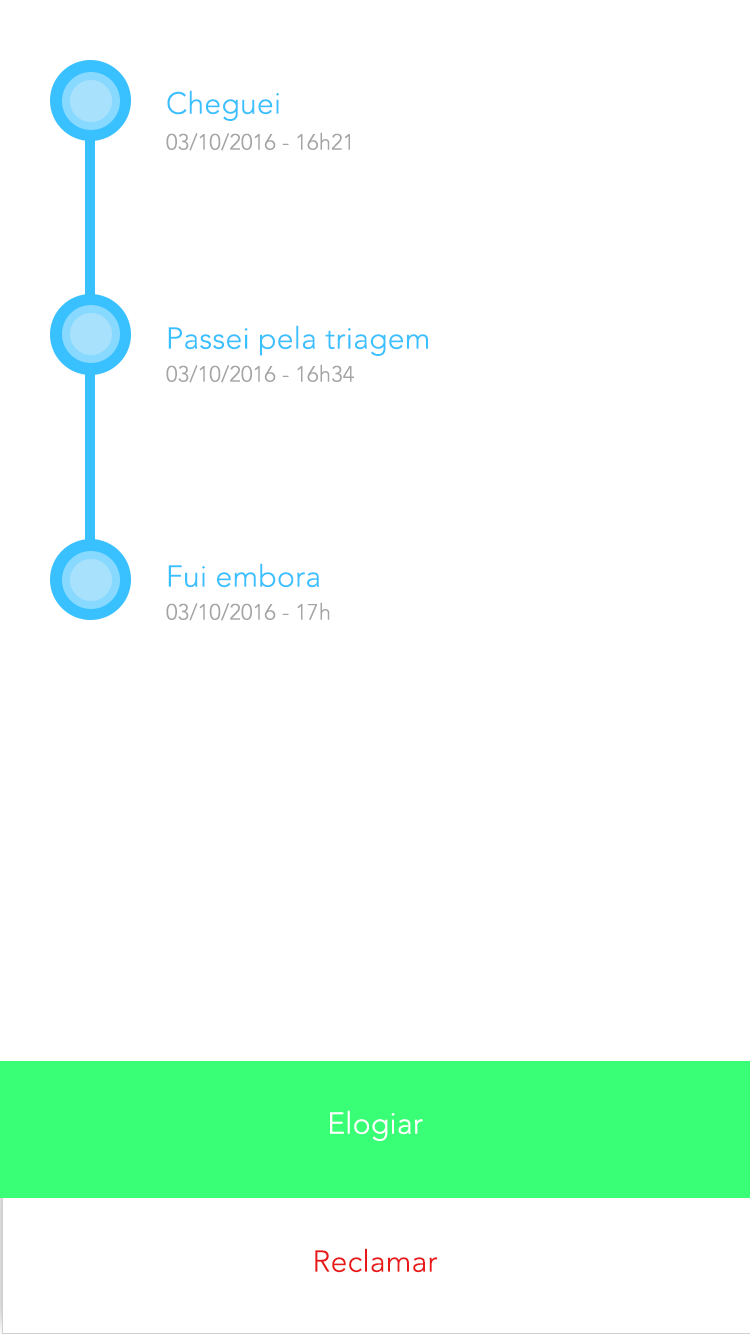
<style>
.page{position:relative;width:750px;height:1334px;background:#ffffff}
.page>*{position:absolute;margin:0}
.t1{font:30px "AvenirLTStd-Light";letter-spacing:0.01em;color:#39c0ff}
.t2{font:22px "AvenirLTStd-Light";letter-spacing:0.01em;color:#a3a4a4}
.t3{font:30px "AvenirLTStd-Light";letter-spacing:0.01em;color:#ffffff}
.t4{font:30px "AvenirLTStd-Light";letter-spacing:0.01em;color:#e81818}
</style>
<div class="page">
<p class="t1" style="left:167px;top:90px;width:112px;height:31px">Cheguei</p>
<p class="t2" style="left:166px;top:132px;width:184px;height:19px">03/10/2016 - 16h21</p>
<p class="t1" style="left:168px;top:325px;width:260px;height:31px">Passei pela triagem</p>
<p class="t2" style="left:166px;top:364px;width:188px;height:19px">03/10/2016 - 16h34</p>
<p class="t1" style="left:168px;top:563px;width:151px;height:25px">Fui embora</p>
<p class="t2" style="left:166px;top:602px;width:164px;height:19px">03/10/2016 - 17h</p>
<p class="t3" style="left:330px;top:1110px;width:93px;height:31px">Elogiar</p>
<p class="t4" style="left:315px;top:1248px;width:123px;height:25px">Reclamar</p>
</div>
